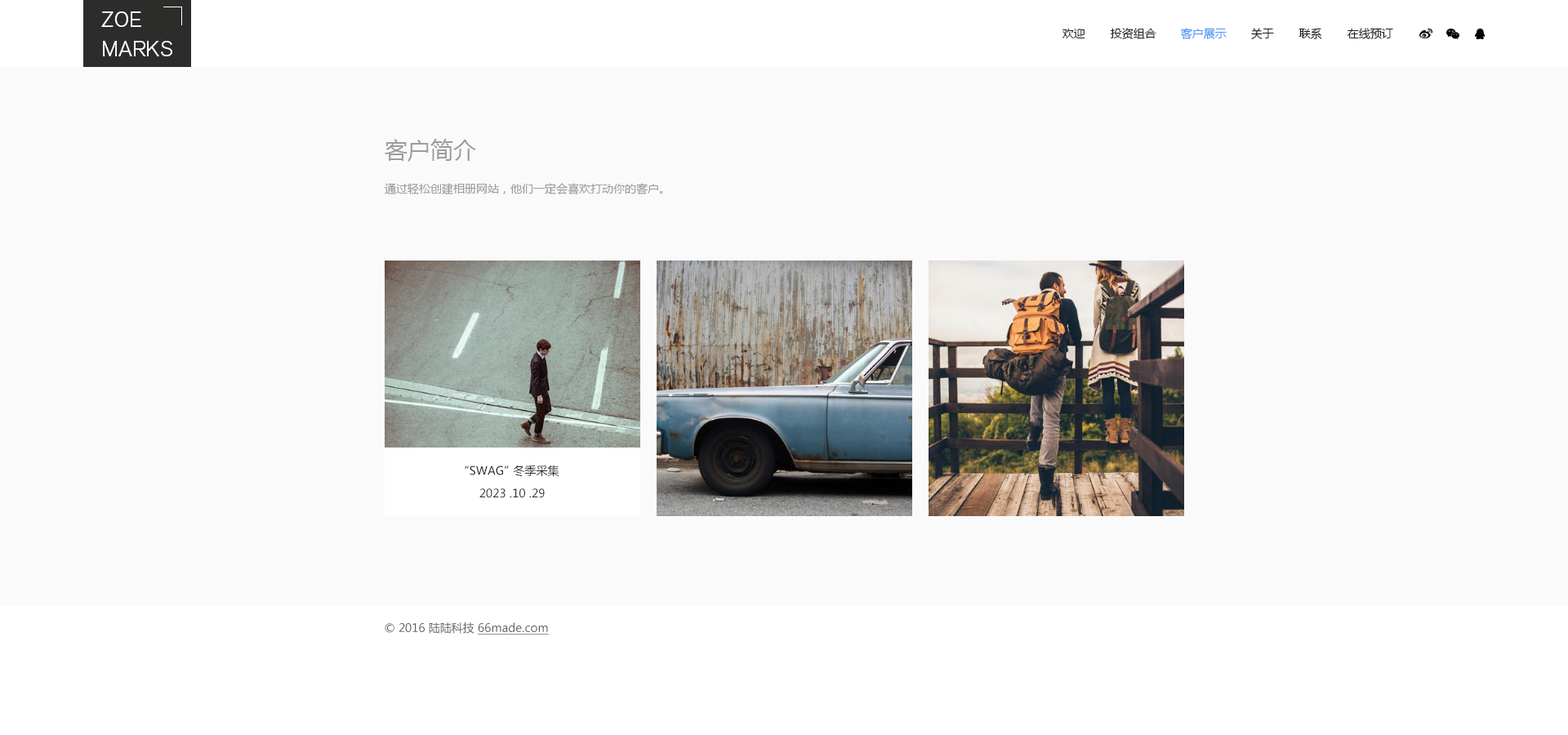
<style>
.page{position:relative;width:1568px;height:735px;background:#fafafa}
.page>*{position:absolute;margin:0}
.t1{font:21.2px/29.4px "AkzidenzGroteskBQ-LightSC";color:#ffffff}
.t2{font:11.4px "MicrosoftYaHei";color:#1c1c1c}
.t3{font:11.4px "MicrosoftYaHei";color:#4595f7}
.t4{font:22.9px "MicrosoftYaHei";color:#9d9c9c}
.t5{font:11.4px "MicrosoftYaHei";color:#9d9c9c}
.t6{font:11.4px "MicrosoftYaHei";color:#2c2c2b}
.t7{font:11.4px "MicrosoftYaHei";color:#5e5d5d}
.t8{font:11.4px "MicrosoftYaHei";color:#5e5d5d;text-decoration:underline}
</style>
<div class="page">
<p class="t1" style="left:101px;top:11px;width:71px;height:45px">ZOE<br>MARKS</p>
<p class="t2" style="left:1062px;top:29px;width:23px;height:9px">欢迎</p>
<p class="t2" style="left:1110px;top:28px;width:46px;height:11px">投资组合</p>
<p class="t3" style="left:1181px;top:28px;width:46px;height:11px">客户展示</p>
<p class="t2" style="left:1251px;top:28px;width:23px;height:11px">关于</p>
<p class="t2" style="left:1298px;top:28px;width:24px;height:11px">联系</p>
<p class="t2" style="left:1347px;top:28px;width:46px;height:11px">在线预订</p>
<p class="t4" style="left:385px;top:139px;width:91px;height:23px">客户简介</p>
<p class="t5" style="left:385px;top:183px;width:278px;height:11px">通过轻松创建相册网站，他们一定会喜欢打动你的客户。</p>
<p class="t6" style="left:465px;top:466px;width:44px;height:9px">“SWAG”</p>
<p class="t6" style="left:513px;top:465px;width:46px;height:12px">冬季采集</p>
<p class="t6" style="left:479px;top:488px;width:66px;height:10px">2023 .10 .29</p>
<p class="t7" style="left:385px;top:622px;width:164px;height:13px">© 2016 陆陆科技 <span class="t8">66made.com</span></p>
</div>
